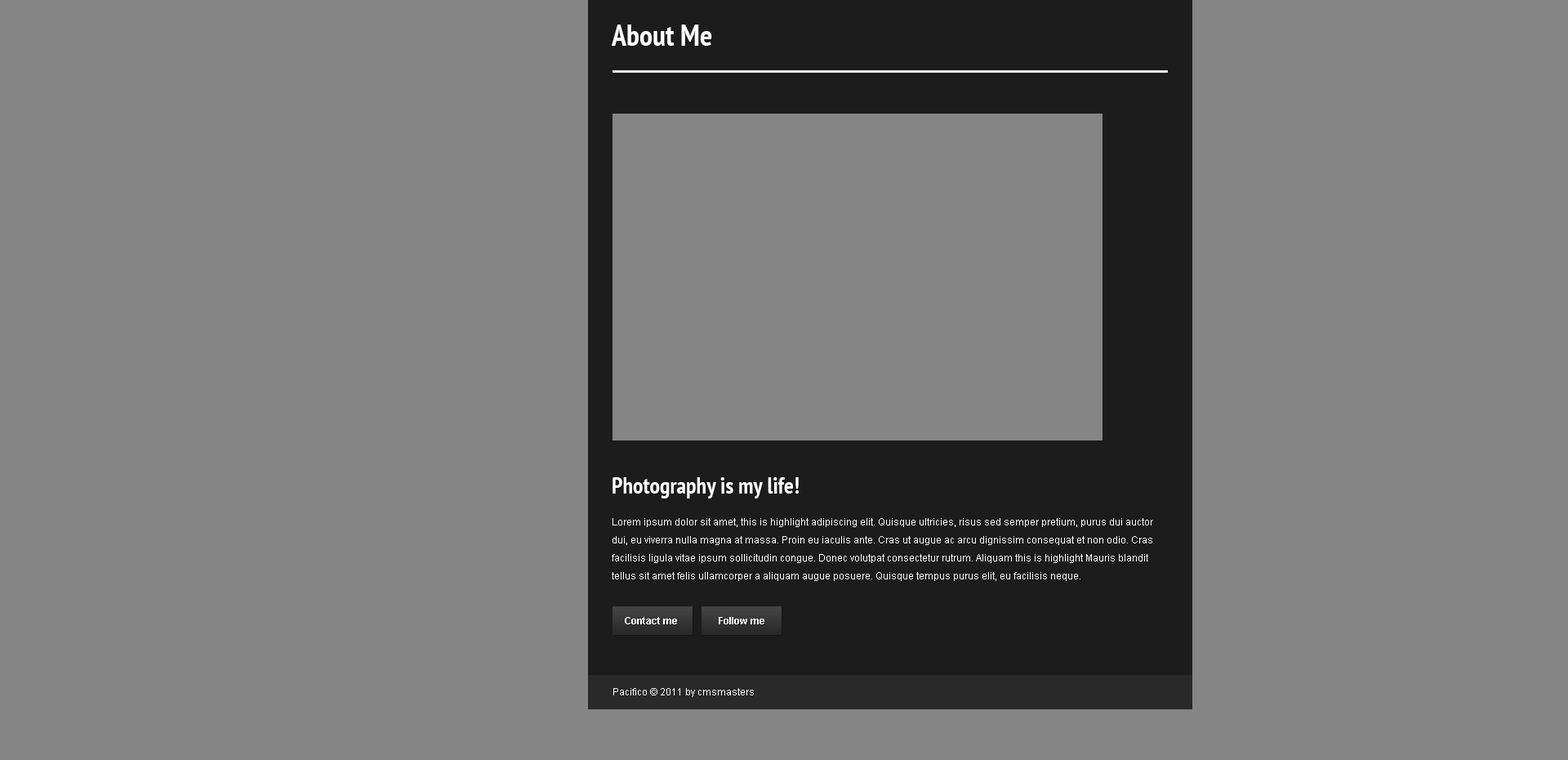
<style>
.page{position:relative;width:1568px;height:760px;background:#858585}
.page>*{position:absolute;margin:0}
.t1{font:29.4px "PTSans-NarrowBold";color:#ffffff}
.t2{font:22.9px "PTSans-NarrowBold";color:#ffffff}
.t3{font:9.8px/18px "ArialMT";color:#ffffff}
.t4{font:9.8px "Arial-BoldMT";color:#ffffff}
.t5{font:9.8px "ArialMT";color:#ffffff}
</style>
<div class="page">
<p class="t1" style="left:611px;top:24px;width:101px;height:22px">About Me</p>
<p class="t2" style="left:612px;top:477px;width:187px;height:21px">Photography is my life!</p>
<p class="t3" style="left:612px;top:518px;width:541px;height:63px">Lorem ipsum dolor sit amet, this is highlight adipiscing elit. Quisque ultricies, risus sed semper pretium, purus dui auctor dui, eu viverra nulla magna at massa. Proin eu iaculis ante. Cras ut augue ac arcu dignissim consequat et non odio. Cras facilisis ligula vitae ipsum sollicitudin congue. Donec volutpat consectetur rutrum. Aliquam this is highlight Mauris blandit tellus sit amet felis ullamcorper a aliquam augue posuere. Quisque tempus purus elit, eu facilisis neque.</p>
<p class="t4" style="left:625px;top:617px;width:52px;height:7px">Contact me</p>
<p class="t4" style="left:719px;top:617px;width:45px;height:7px">Follow me</p>
<p class="t5" style="left:613px;top:688px;width:141px;height:9px">Pacifico © 2011 by cmsmasters</p>
</div>
